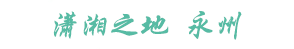
<style>
.page{position:relative;width:294px;height:49px;background:#ffffff}
.page>*{position:absolute;margin:0}
.t1{font:30px "STXingkai";color:#57bba4;font-style:italic}
</style>
<div class="page">
<p class="t1" style="left:53px;top:11px;width:189px;height:29px">潇湘之地  永州</p>
</div>
